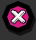
<style>
.page{position:relative;width:36px;height:40px;background:#333333}
.page>*{position:absolute;margin:0}
.t1{font:34.6px "Algerian";color:#ffffff}
</style>
<div class="page">
<p class="t1" style="left:11px;top:10px;width:15px;height:14px">×</p>
</div>
